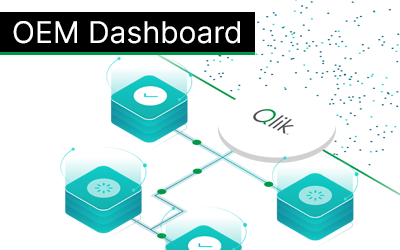
<style>
.page{position:relative;width:400px;height:250px;background:#ffffff}
.page>*{position:absolute;margin:0}
.t1{font:30px "Inter-Regular";color:#ffffff}
</style>
<div class="page">
<p class="t1" style="left:13px;top:21px;width:227px;height:23px">OEM Dashboard</p>
</div>
